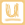
<style>
.page{position:relative;width:25px;height:25px;background:#ffffff}
.page>*{position:absolute;margin:0}
.t1{font:28px "Stroke";color:#f3c97f}
</style>
<div class="page">
<p class="t1" style="left:5px;top:3px;width:14px;height:15px">u</p>
</div>
